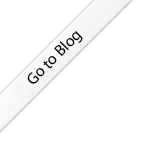
<style>
.page{position:relative;width:149px;height:149px;background:#ffffff}
.page>*{position:absolute;margin:0}
.t1{font:16px "MyriadPro-Regular";color:#000000}
</style>
<div class="page">
<p class="t1" style="left:27px;top:31px;width:56px;height:53px;rotate:-46deg">Go to Blog</p>
</div>
